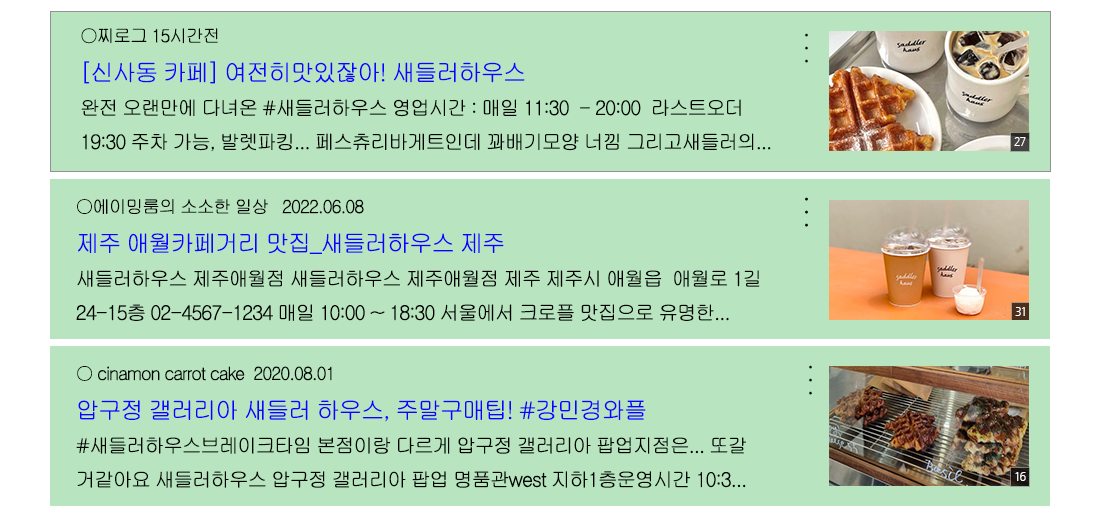
<style>
.page{position:relative;width:1100px;height:520px;background:#b8e4bf}
.page>*{position:absolute;margin:0}
.t1{font:20px "Gulim";letter-spacing:-0.075em;color:#000401}
.t2{font:18px "Gulim";letter-spacing:-0.075em;color:#000401}
.t3{font:24px "Gulim";letter-spacing:-0.075em;color:#1200ff}
.t4{font:24px/3px "Gulim";letter-spacing:-0.075em;color:#000401}
.t5{font:10.7px "NanumGothic";letter-spacing:-0.075em;color:#ffffff}
.t6{font:20px "Gulim";letter-spacing:-0.075em;color:#000000}
.t7{font:18px "Gulim";letter-spacing:-0.075em;color:#000000}
</style>
<div class="page">
<p class="t1" style="left:81px;top:28px;width:690px;height:124px"><span class="t2">○찌로그 15시간전<br></span><span class="t3">[신사동 카페] 여전히맛있잖아! 새들러하우스<br></span>완전 오랜만에 다녀온 #새들러하우스 영업시간 : 매일 11:30  - 20:00  라스트오더 <br>19:30 주차 가능, 발렛파킹... 페스츄리바게트인데 꽈배기모양 너낌 그리고새들러의...</p>
<p class="t4" style="left:805px;top:33px;width:3px;height:30px">.<br>.<br>.</p>
<p class="t5" style="left:1014px;top:137px;width:12px;height:9px">27</p>
<p class="t6" style="left:76px;top:199px;width:684px;height:122px"><span class="t7">○에이밍룸의 소소한 일상   2022.06.08<br></span><span class="t3">제주 애월카페거리 맛집_새들러하우스 제주<br></span>새들러하우스 제주애월점 새들러하우스 제주애월점 제주 제주시 애월읍  애월로 1길 <br>24-15층 02-4567-1234 매일 10:00 ~ 18:30 서울에서 크로플 맛집으로 유명한...</p>
<p class="t1" style="left:76px;top:366px;width:670px;height:122px"><span class="t2">○ cinamon carrot cake  2020.08.01<br></span><span class="t3">압구정 갤러리아 새들러 하우스, 주말구매팁! #강민경와플<br></span>#새들러하우스브레이크타임 본점이랑 다르게 압구정 갤러리아 팝업지점은... 또갈<br>거같아요 새들러하우스 압구정 갤러리아 팝업 명품관west 지하1층운영시간 10:3...</p>
<p class="t4" style="left:809px;top:365px;width:3px;height:30px">.<br>.<br>.</p>
<p class="t5" style="left:1015px;top:472px;width:11px;height:9px">16</p>
</div>
